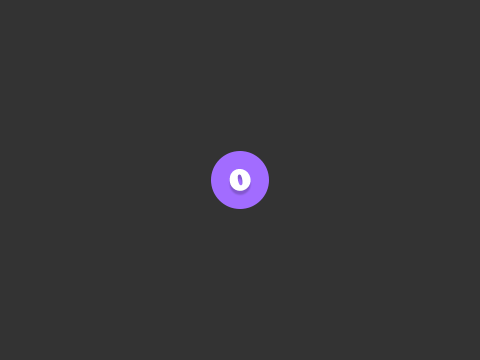
<style>
.page{position:relative;width:480px;height:360px;background:#333333}
.page>*{position:absolute;margin:0}
.t1{font:38px "CooperBlack";letter-spacing:0.005em;color:#ffffff}
</style>
<div class="page">
<p class="t1" style="left:229px;top:169px;width:22px;height:22px">0</p>
</div>
